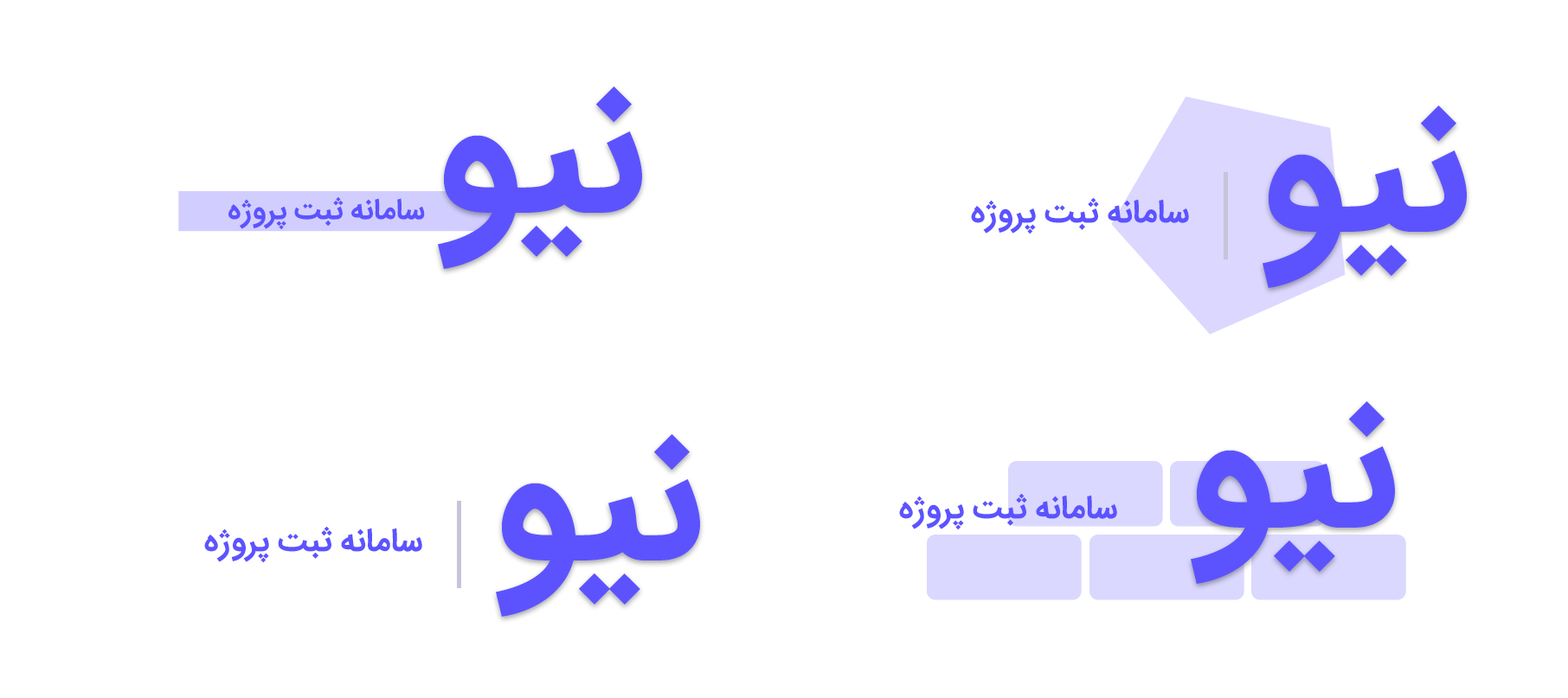
<style>
.page{position:relative;width:1568px;height:698px;background:#ffffff}
.page>*{position:absolute;margin:0}
.t1{font:183.4px "IRANSansWeb-Bold";color:#5c53ff}
.t2{font:29.2px "IRANSansWeb-Bold";color:#5c53ff}
.t3{font:32.5px "IRANSansWeb-Bold";color:#5c53ff}
</style>
<div class="page">
<p class="t1" style="left:438px;top:87px;width:204px;height:182px">نیو</p>
<p class="t1" style="left:1263px;top:106px;width:204px;height:182px">نیو</p>
<p class="t2" style="left:228px;top:196px;width:197px;height:34px">سامانه ثبت پروژه</p>
<p class="t3" style="left:971px;top:197px;width:218px;height:38px">سامانه ثبت پروژه</p>
<p class="t1" style="left:1191px;top:402px;width:204px;height:182px">نیو</p>
<p class="t1" style="left:496px;top:434px;width:204px;height:183px">نیو</p>
<p class="t3" style="left:899px;top:493px;width:218px;height:37px">سامانه ثبت پروژه</p>
<p class="t3" style="left:204px;top:526px;width:218px;height:37px">سامانه ثبت پروژه</p>
</div>
